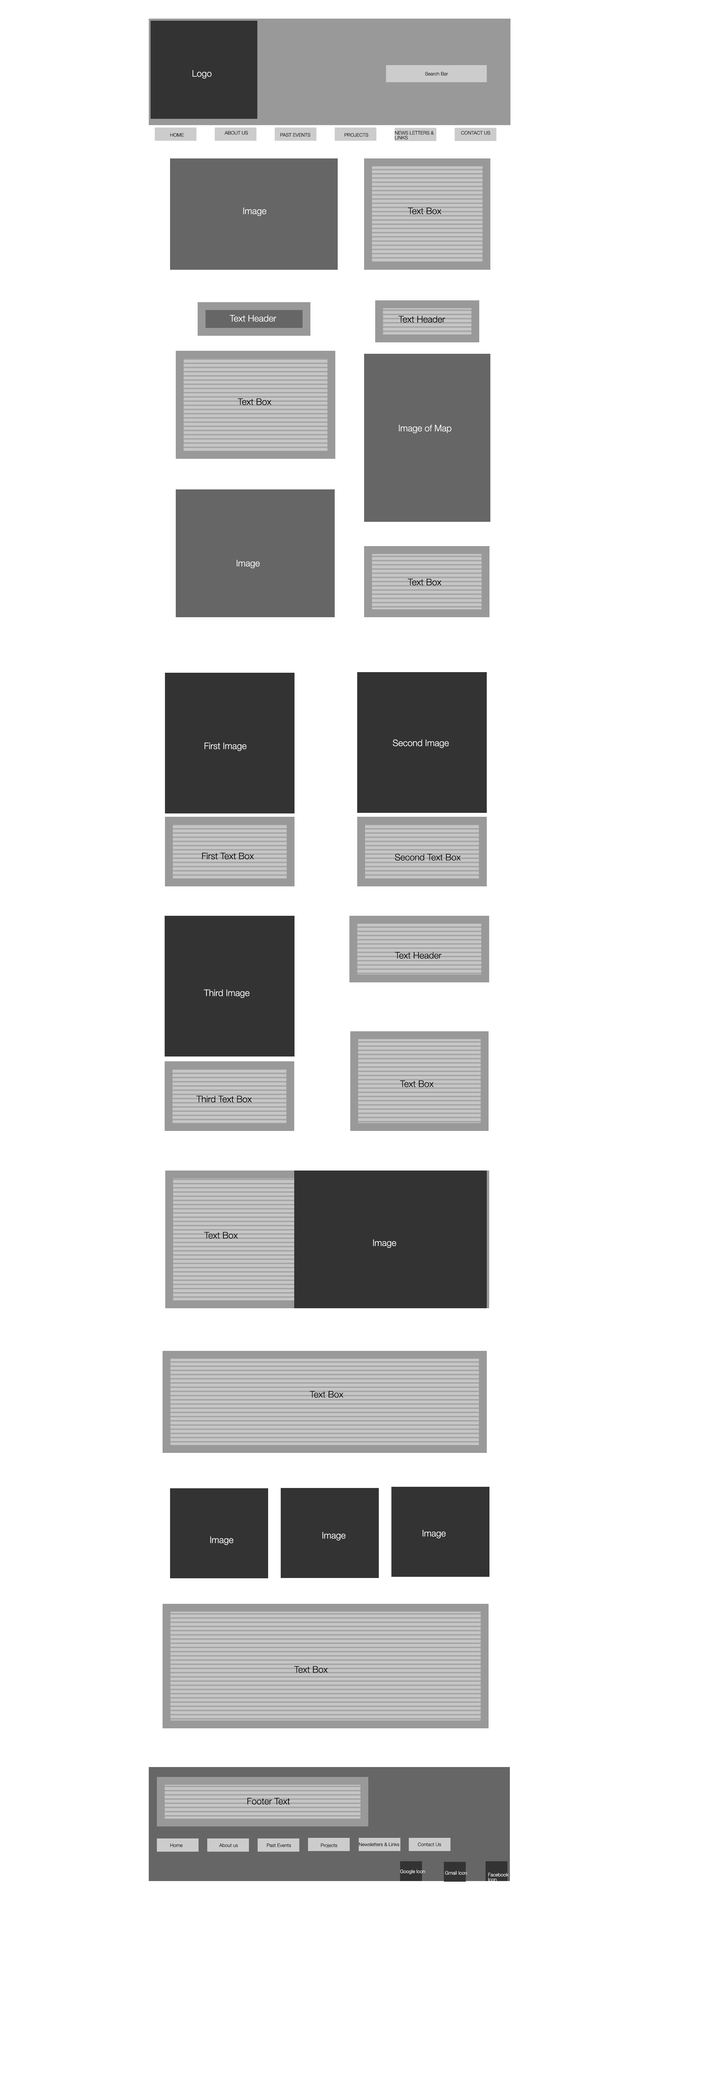
<style>
.page{position:relative;width:727px;height:2092px;background:#ffffff}
.page>*{position:absolute;margin:0}
.t1{font:9px "HelveticaNeue-Light";color:#ffffff}
.t2{font:4.8px "HelveticaNeue-Light";color:#000000}
.t3{font:4.8px/4.8px "HelveticaNeue-Light";color:#000000}
.t4{font:9px "HelveticaNeue-Light";color:#000000}
.t5{font:9px "HelveticaNeue-Light";color:#010000}
.t6{font:4.8px "HelveticaNeue-Light";color:#ffffff}
.t7{font:4.8px/4.8px "HelveticaNeue-Light";color:#ffffff}
</style>
<div class="page">
<p class="t1" style="left:193px;top:70px;width:19px;height:9px">Logo</p>
<p class="t2" style="left:425px;top:72px;width:23px;height:4px">Search Bar</p>
<p class="t2" style="left:170px;top:133px;width:14px;height:4px">HOME</p>
<p class="t2" style="left:224px;top:131px;width:24px;height:4px">ABOUT US</p>
<p class="t2" style="left:280px;top:133px;width:30px;height:4px">PAST EVENTS</p>
<p class="t2" style="left:345px;top:133px;width:23px;height:4px">PROJECTS</p>
<p class="t3" style="left:395px;top:131px;width:39px;height:9px">NEWS LETTERS &amp; <br>LINKS</p>
<p class="t2" style="left:461px;top:131px;width:29px;height:4px">CONTACT US</p>
<p class="t1" style="left:243px;top:207px;width:23px;height:9px">Image</p>
<p class="t4" style="left:408px;top:207px;width:34px;height:7px">Text Box</p>
<p class="t1" style="left:230px;top:315px;width:47px;height:7px">Text Header</p>
<p class="t4" style="left:398px;top:316px;width:48px;height:6px">Text Header</p>
<p class="t4" style="left:238px;top:398px;width:34px;height:7px">Text Box</p>
<p class="t1" style="left:399px;top:424px;width:53px;height:9px">Image of Map</p>
<p class="t1" style="left:237px;top:560px;width:23px;height:8px">Image</p>
<p class="t5" style="left:408px;top:578px;width:34px;height:7px">Text Box</p>
<p class="t1" style="left:205px;top:742px;width:42px;height:9px">First Image</p>
<p class="t1" style="left:393px;top:739px;width:56px;height:9px">Second Image</p>
<p class="t4" style="left:202px;top:852px;width:52px;height:7px">First Text Box</p>
<p class="t4" style="left:395px;top:854px;width:66px;height:6px">Second Text Box</p>
<p class="t4" style="left:395px;top:952px;width:47px;height:6px">Text Header</p>
<p class="t1" style="left:204px;top:989px;width:46px;height:9px">Third Image</p>
<p class="t4" style="left:400px;top:1080px;width:34px;height:7px">Text Box</p>
<p class="t4" style="left:196px;top:1095px;width:56px;height:7px">Third Text Box</p>
<p class="t4" style="left:204px;top:1232px;width:34px;height:6px">Text Box</p>
<p class="t1" style="left:373px;top:1239px;width:23px;height:9px">Image</p>
<p class="t4" style="left:310px;top:1390px;width:34px;height:7px">Text Box</p>
<p class="t1" style="left:423px;top:1529px;width:23px;height:9px">Image</p>
<p class="t1" style="left:210px;top:1536px;width:23px;height:9px">Image</p>
<p class="t1" style="left:322px;top:1532px;width:24px;height:8px">Image</p>
<p class="t4" style="left:294px;top:1666px;width:34px;height:6px">Text Box</p>
<p class="t4" style="left:248px;top:1797px;width:42px;height:7px">Footer Text</p>
<p class="t2" style="left:170px;top:1843px;width:13px;height:4px">Home</p>
<p class="t2" style="left:219px;top:1843px;width:19px;height:4px">About us</p>
<p class="t2" style="left:267px;top:1843px;width:24px;height:4px">Past Events</p>
<p class="t2" style="left:321px;top:1843px;width:17px;height:5px">Projects</p>
<p class="t2" style="left:359px;top:1842px;width:40px;height:4px">Newsletters &amp; Links</p>
<p class="t2" style="left:418px;top:1842px;width:23px;height:4px">Contact Us</p>
<p class="t6" style="left:400px;top:1869px;width:25px;height:5px">Google Icon</p>
<p class="t6" style="left:445px;top:1870px;width:22px;height:4px">Gmail Icon</p>
<p class="t7" style="left:488px;top:1872px;width:21px;height:9px">Facebook Icon</p>
</div>
